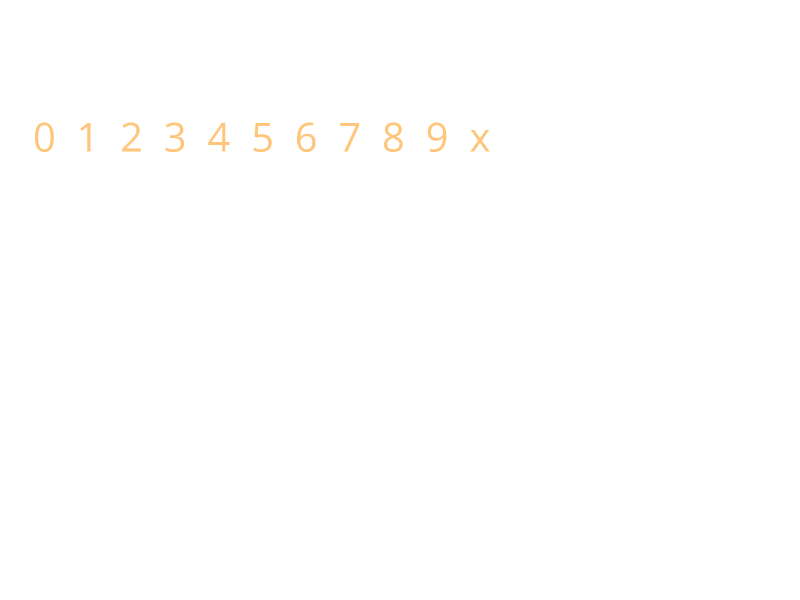
<style>
.page{position:relative;width:800px;height:600px;background:#ffffff}
.page>*{position:absolute;margin:0}
.t1{font:40px "OpenSans";color:#ffc67b}
</style>
<div class="page">
<p class="t1" style="left:35px;top:122px;width:455px;height:30px">0  1  2  3  4  5  6  7  8  9  x</p>
</div>
